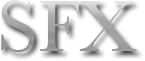
<style>
.page{position:relative;width:145px;height:61px;background:#ffffff}
.page>*{position:absolute;margin:0}
.t1{font:75px "Baskerville";font-variant:small-caps}
</style>
<div class="page">
<p class="t1" style="left:1px;top:0px;width:136px;height:52px">SFX</p>
</div>
